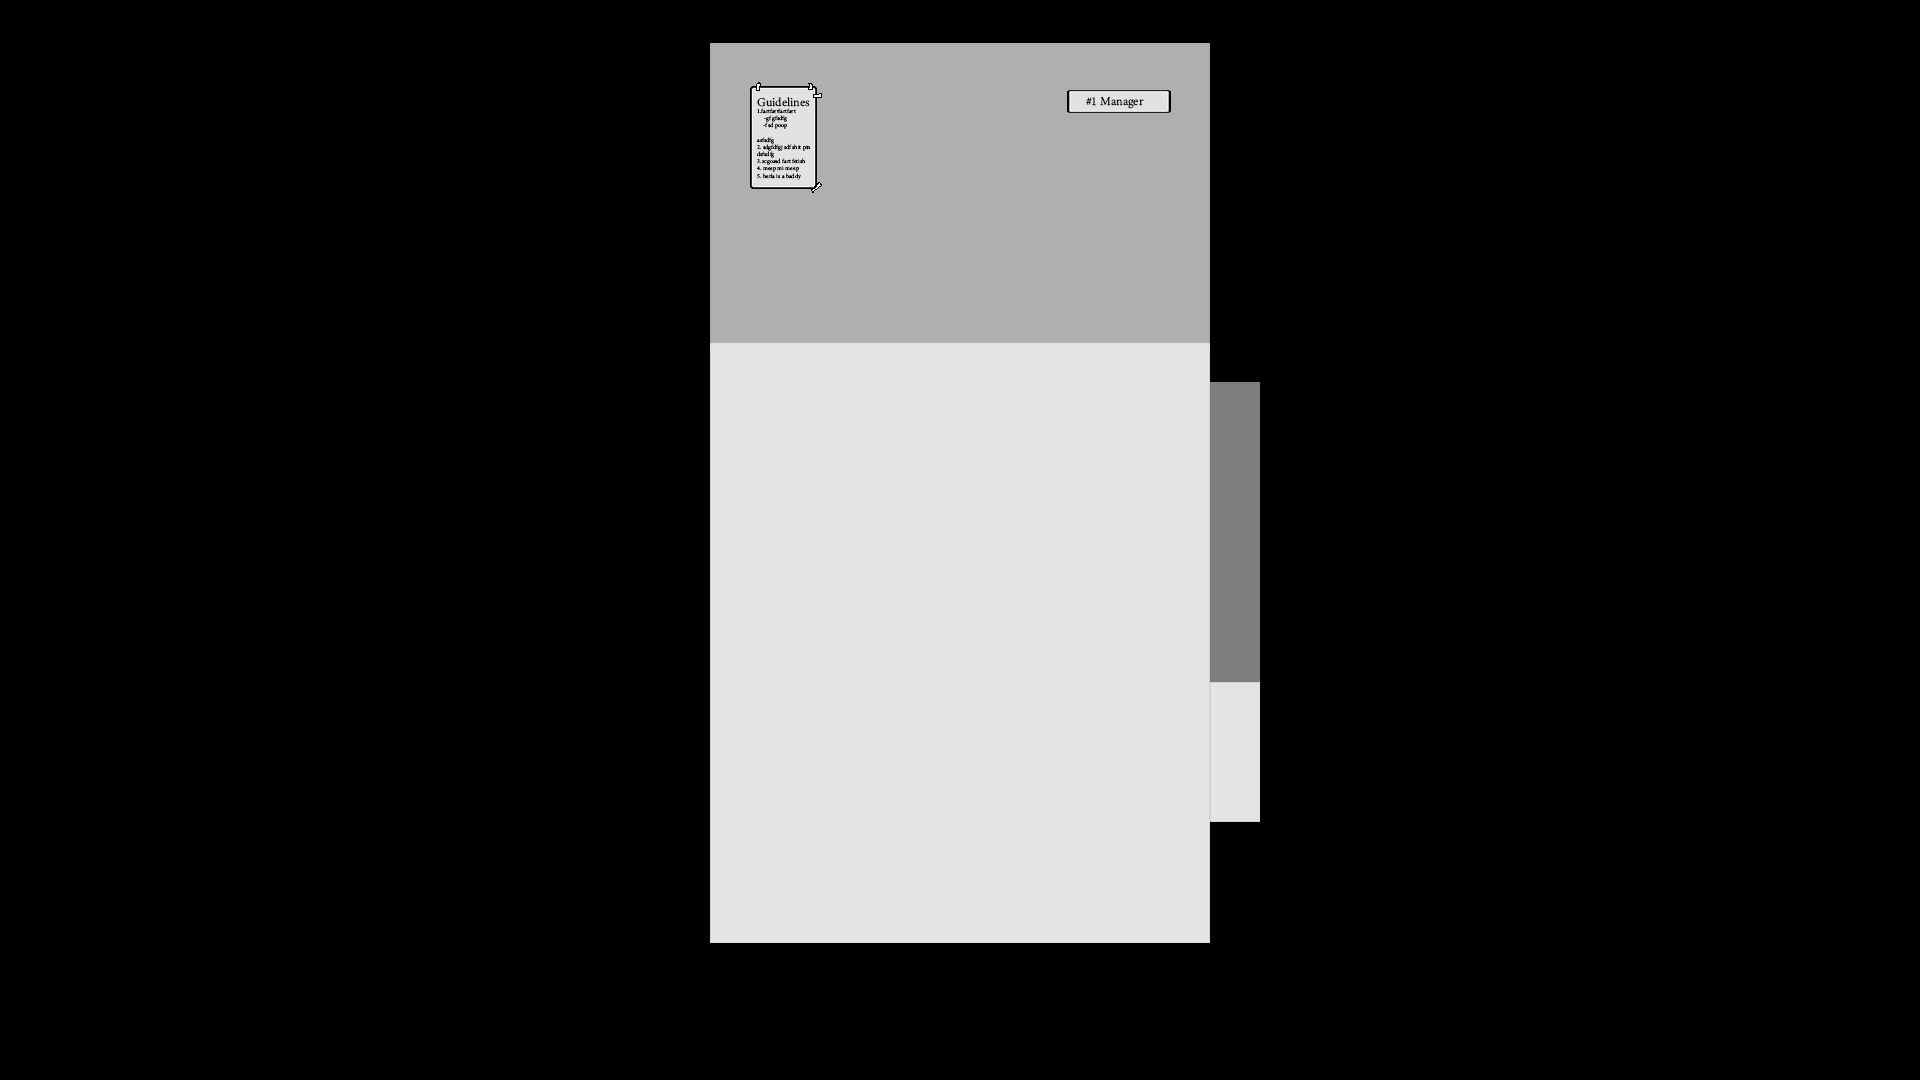
<style>
.page{position:relative;width:1920px;height:1080px;background:#000000}
.page>*{position:absolute;margin:0}
.t1{font:6px "MinionVariableConcept-Roman";color:#000000}
.t2{font:12px "MinionVariableConcept-Roman";color:#000000}
</style>
<div class="page">
<p class="t1" style="left:757px;top:97px;width:54px;height:83px"><span class="t2">Guidelines<br></span>1.fartfartfartfart<br>     -gf gfsdfg<br>    -f sd poop<br><br>asfsdfg<br>2. sdgfdfgj sdf shit pin<br>dsfsdfg<br>3.xcgoasd fart fetish<br>4. meep mi meep<br>5. herla is a baddy</p>
<p class="t2" style="left:1086px;top:97px;width:58px;height:12px">#1 Manager</p>
</div>
